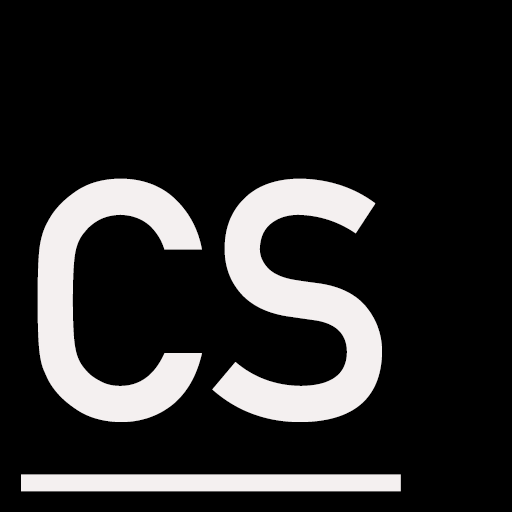
<style>
.page{position:relative;width:512px;height:512px;background:#000000}
.page>*{position:absolute;margin:0}
.t1{font:336px "DINAlternate-Bold";color:#f4f0f0;text-decoration:underline}
</style>
<div class="page">
<p class="t1" style="left:21px;top:178px;width:380px;height:314px">CS</p>
</div>
